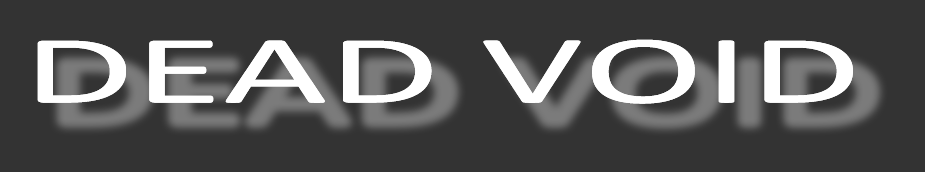
<style>
.page{position:relative;width:925px;height:172px;background:#333333}
.page>*{position:absolute;margin:0}
.t1{font:97.7px "Calibri";color:#ffffff;scale:1.86 1}
</style>
<div class="page">
<p class="t1" style="left:37px;top:39px;width:816px;height:65px">DEAD VOID</p>
</div>
